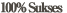
<style>
.page{position:relative;width:67px;height:13px;background:#ffffff}
.page>*{position:absolute;margin:0}
.t1{font:13px "RyuminPro-ExBold";letter-spacing:-0.12em;color:#4c4842;font-weight:bold}
</style>
<div class="page">
<p class="t1" style="left:1px;top:2px;width:62px;height:11px">100% Sukses</p>
</div>
